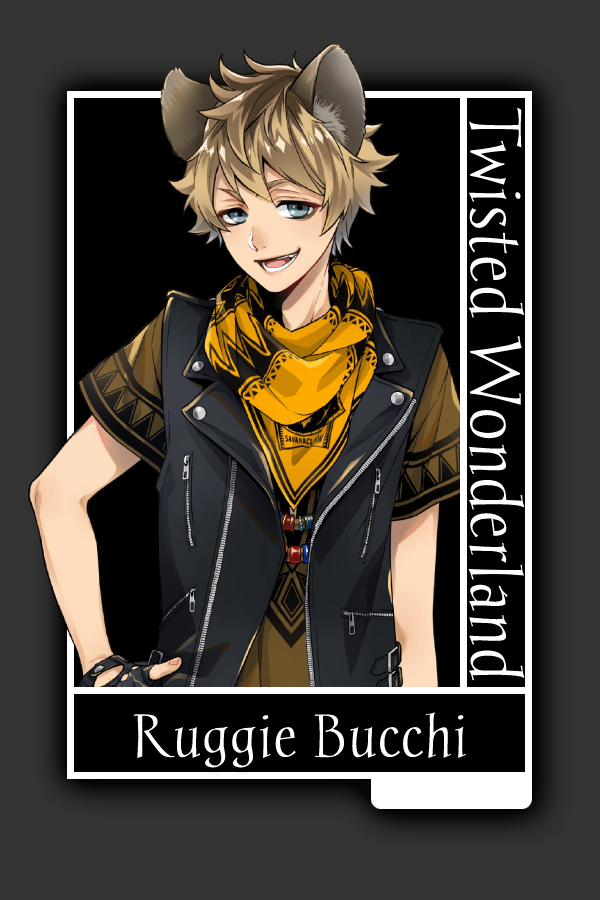
<style>
.page{position:relative;width:600px;height:900px;background:#333333}
.page>*{position:absolute;margin:0}
.t1{font:60px "Chantelli-Antiqua";color:#ffffff}
.t2{font:50px "Chantelli-Antiqua";color:#ffffff}
</style>
<div class="page">
<p class="t1" style="left:468px;top:107px;width:57px;height:574px;rotate:90deg">Twisted Wonderland</p>
<p class="t2" style="left:134px;top:712px;width:332px;height:56px">Ruggie Bucchi</p>
</div>
